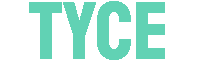
<style>
.page{position:relative;width:200px;height:60px;background:#ffffff}
.page>*{position:absolute;margin:0}
.t1{font:80.5px "Staatliches-Regular";color:#61d2b4;font-weight:bold}
</style>
<div class="page">
<p class="t1" style="left:29px;top:1px;width:136px;height:59px">tyce</p>
</div>
